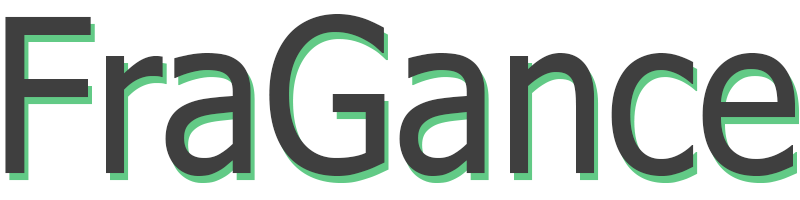
<style>
.page{position:relative;width:800px;height:200px;background:#ffffff}
.page>*{position:absolute;margin:0}
.t1{font:215.2px "Tahoma";color:#3f3f3f;scale:0.91 1}
</style>
<div class="page">
<p class="t1" style="left:5px;top:13px;width:790px;height:163px">FraGance</p>
</div>
